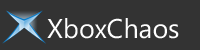
<style>
.page{position:relative;width:200px;height:50px;background:#333333}
.page>*{position:absolute;margin:0}
.t1{font:27px "SegoeWP";color:#ffffff}
</style>
<div class="page">
<p class="t1" style="left:47px;top:18px;width:132px;height:21px">XboxChaos</p>
</div>
